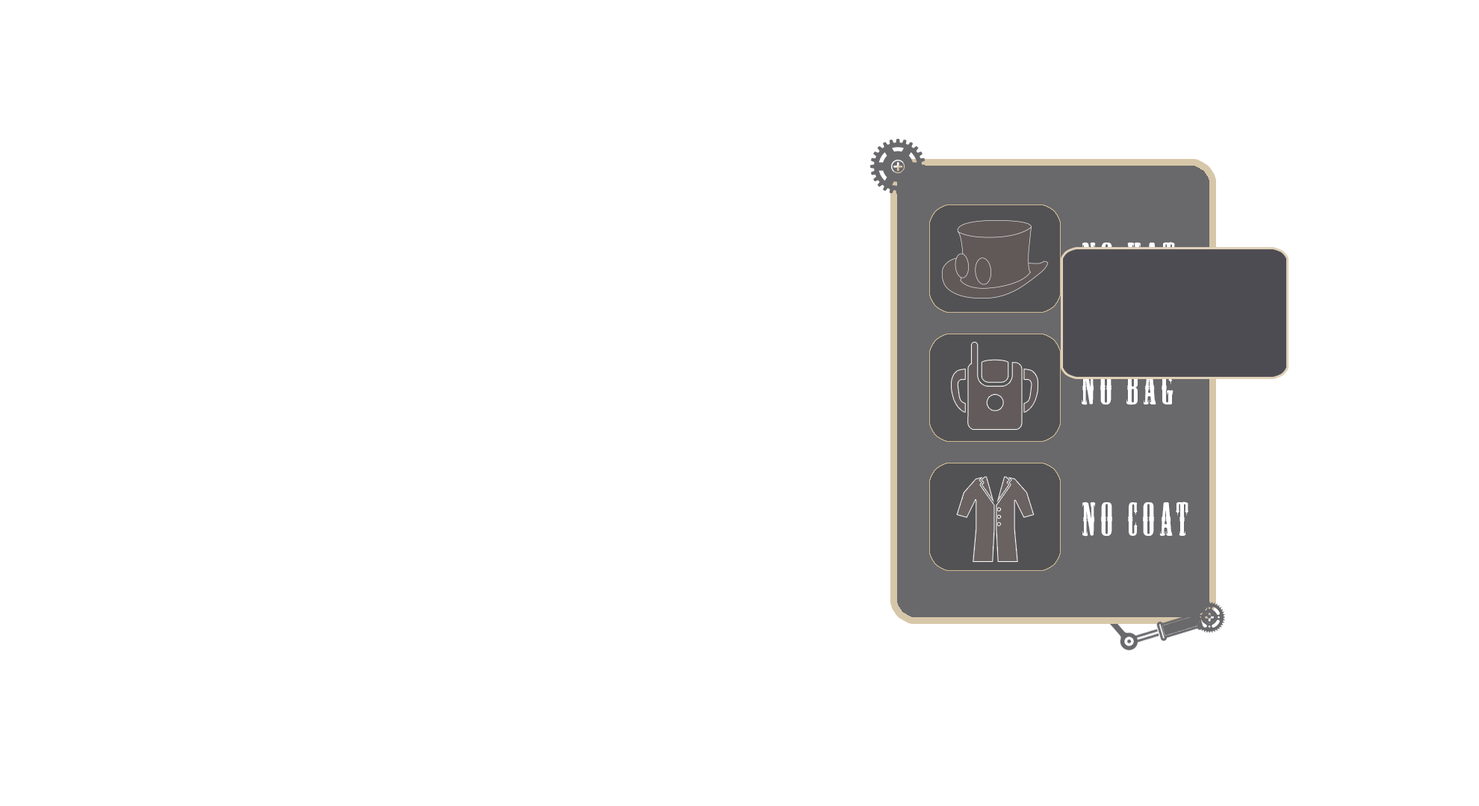
<style>
.page{position:relative;width:1479px;height:806px;background:#ffffff}
.page>*{position:absolute;margin:0}
.t1{font:44.8px "MesquiteStd";letter-spacing:0.1em;color:#ffffff}
</style>
<div class="page">
<p class="t1" style="left:1081px;top:370px;width:92px;height:35px">no bag</p>
<p class="t1" style="left:1082px;top:502px;width:106px;height:35px">no coat</p>
</div>
